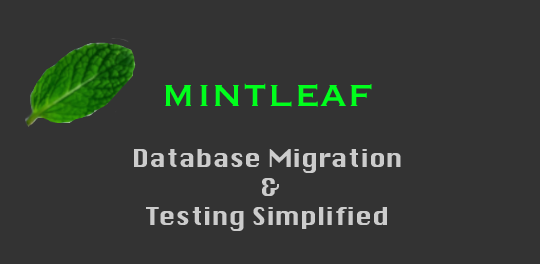
<style>
.page{position:relative;width:540px;height:264px;background:#333333}
.page>*{position:absolute;margin:0}
.t1{font:48px "Copperplate";color:#00ff1c}
.t2{font:24px "Krungthep";color:#cccccc;scale:1.06 1}
</style>
<div class="page">
<p class="t1" style="left:165px;top:83px;width:207px;height:24px">mintleaf</p>
<p class="t2" style="left:134px;top:149px;width:267px;height:82px;text-align:center">Database Migration <br>&amp;<br>Testing Simplified</p>
</div>
